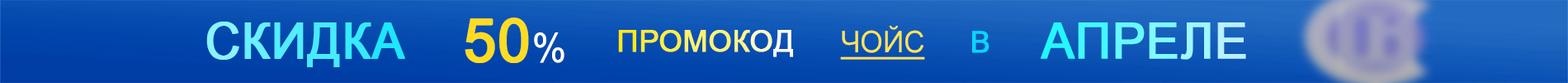
<style>
.page{position:relative;width:1568px;height:83px}
.page>*{position:absolute;margin:0}
.t1{font:59.4px "ArialNarrow";color:#fedc22;text-transform:uppercase;font-weight:bold;scale:1.19 1}
.t2{font:39.6px "ArialNarrow";color:#ffffff;scale:1.19 1}
.t3{font:49.5px "ArialNarrow";color:#89f3ff;font-weight:bold;scale:1.19 1}
.t4{font:49.5px "ArialNarrow";color:#69efff;font-weight:bold;scale:1.19 1}
.t5{font:49.5px "ArialNarrow";color:#53ecfe;font-weight:bold;scale:1.19 1}
.t6{font:49.5px "ArialNarrow";color:#48eafd;font-weight:bold;scale:1.19 1}
.t7{font:49.5px "ArialNarrow";color:#35eaff;font-weight:bold;scale:1.19 1}
.t8{font:49.5px "ArialNarrow";color:#1de6fe;font-weight:bold;scale:1.19 1}
.t9{font:29.7px "ArialMT";color:#ffeb09;text-transform:uppercase;font-weight:bold}
.t10{font:29.7px "ArialMT";color:#fceb37;text-transform:uppercase;font-weight:bold}
.t11{font:29.7px "ArialMT";color:#feef43;text-transform:uppercase;font-weight:bold}
.t12{font:29.7px "ArialMT";color:#fef26b;text-transform:uppercase;font-weight:bold}
.t13{font:29.7px "ArialMT";color:#fff377;text-transform:uppercase;font-weight:bold}
.t14{font:29.7px "ArialMT";color:#fff58a;text-transform:uppercase;font-weight:bold}
.t15{font:29.7px "ArialMT";color:#fefec5;text-transform:uppercase;font-weight:bold}
.t16{font:29.7px "ArialMT";color:#fefefd;text-transform:uppercase;font-weight:bold}
.t17{font:29.7px "ArialNarrow";color:#ffe554;text-transform:uppercase;text-decoration:underline;scale:1.19 1}
.t18{font:49.5px "ArialMT";color:#23f7ff;font-weight:bold}
.t19{font:49.5px "ArialMT";color:#44f8ff;font-weight:bold}
.t20{font:49.5px "ArialMT";color:#67f9ff;font-weight:bold}
.t21{font:49.5px "ArialMT";color:#80faff;font-weight:bold}
.t22{font:49.5px "ArialMT";color:#9ff7ff;font-weight:bold}
.t23{font:49.5px "ArialMT";color:#b8f1ff;font-weight:bold}
.t24{font:29.7px "ArialMT";color:#0dd3fd;text-transform:uppercase;font-weight:bold}
</style>
<div class="page">
<p class="t1" style="left:465px;top:17px;width:99px;height:46px">50<span class="t2">%</span></p>
<p class="t3" style="left:206px;top:21px;width:199px;height:46px">С<span class="t4">К</span><span class="t5">И</span><span class="t6">Д</span><span class="t7">К</span><span class="t8">А</span></p>
<p class="t9" style="left:618px;top:30px;width:175px;height:27px">п<span class="t10">р</span><span class="t11">о</span><span class="t12">м</span><span class="t13">о</span><span class="t14">к</span><span class="t15">о</span><span class="t16">д</span></p>
<p class="t17" style="left:840px;top:26px;width:85px;height:33px">чойс</p>
<p class="t18" style="left:1041px;top:22px;width:205px;height:37px">А<span class="t19">П</span><span class="t20">Р</span><span class="t21">Е</span><span class="t22">Л</span><span class="t23">Е</span></p>
<p class="t24" style="left:972px;top:31px;width:17px;height:22px">В</p>
</div>
